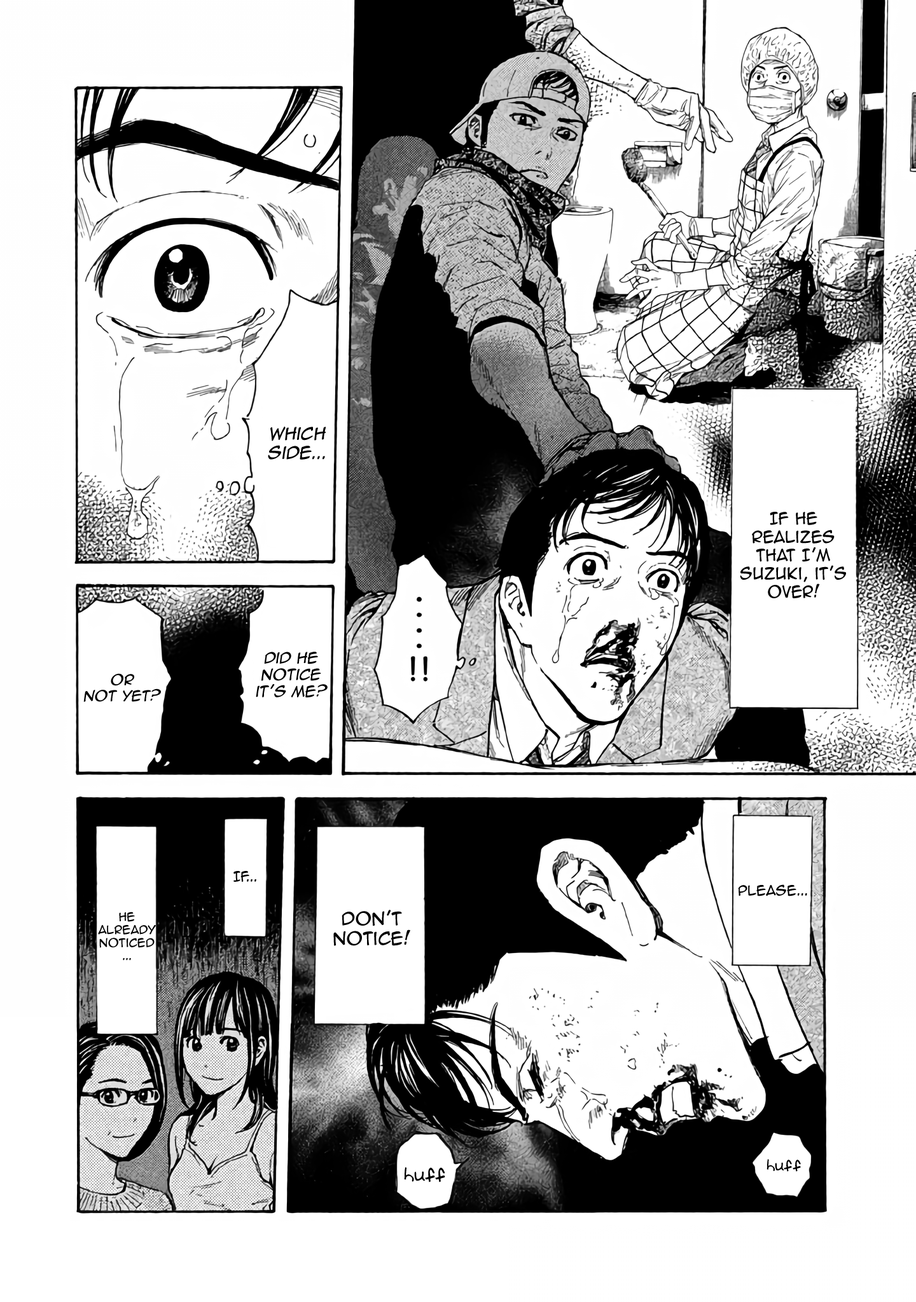
<style>
.page{position:relative;width:916px;height:1302px;background:#ffffff}
.page>*{position:absolute;margin:0}
.t1{font:15.9px "AnimeAce2.0BB";color:#000000;font-style:italic}
.t2{font:15.3px "AnimeAce2.0BB";color:#000000;scale:0.96 1}
.t3{font:14px "AnimeAce2.0BB";color:#000000;font-style:italic}
.t4{font:13.4px "AnimeAce2.0BB";color:#000000;font-style:italic}
.t5{font:12.7px "AnimeAce2.0BB";color:#000000}
.t6{font:10.8px "AnimeAce2.0BB";color:#000000}
.t7{font:16.5px "AnimeAce2.0BB";color:#000000}
.t8{font:19.1px "Augie";color:#000000}
.t9{font:15.9px "Augie";color:#000000}
</style>
<div class="page">
<p class="t1" style="left:268px;top:427px;width:58px;height:33px;text-align:center">Which side...</p>
<p class="t2" style="left:740px;top:512px;width:106px;height:86px;text-align:center">If he realizes that I’m <br>Suzuki, it’s over!</p>
<p class="t3" style="left:256px;top:652px;width:71px;height:46px;text-align:center">Did he notice it’s me?</p>
<p class="t4" style="left:83px;top:673px;width:78px;height:29px;text-align:center">Or <br>not yet?</p>
<p class="t5" style="left:233px;top:871px;width:23px;height:11px">If...</p>
<p class="t5" style="left:738px;top:884px;width:69px;height:13px">Please...</p>
<p class="t6" style="left:98px;top:912px;width:58px;height:49px;text-align:center">He <br>already noticed<br>...</p>
<p class="t7" style="left:333px;top:910px;width:77px;height:36px;text-align:center">don’t notice!</p>
<p class="t8" style="left:404px;top:1167px;width:41px;height:16px">huff</p>
<p class="t9" style="left:766px;top:1159px;width:35px;height:13px">huff</p>
</div>
